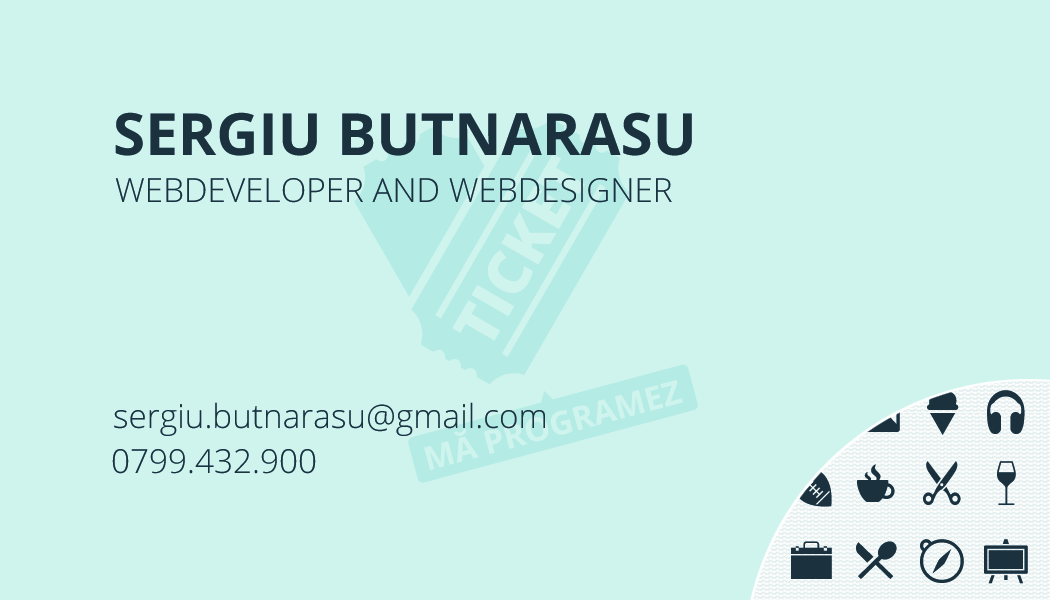
<style>
.page{position:relative;width:1050px;height:600px;background:#cff4ee}
.page>*{position:absolute;margin:0}
.t1{font:58.3px "OpenSans-Bold";color:#1b313e;text-transform:uppercase}
.t2{font:33.3px "OpenSans-Light";color:#1b313e;text-transform:uppercase}
.t3{font:33.3px "OpenSans-Light";color:#1b313e}
</style>
<div class="page">
<p class="t1" style="left:115px;top:112px;width:577px;height:44px">Sergiu Butnarasu</p>
<p class="t2" style="left:115px;top:178px;width:557px;height:25px">webdeveloper and webdesigner</p>
<p class="t3" style="left:114px;top:402px;width:431px;height:34px">sergiu.butnarasu@gmail.com</p>
<p class="t3" style="left:112px;top:449px;width:204px;height:25px">0799.432.900</p>
</div>
